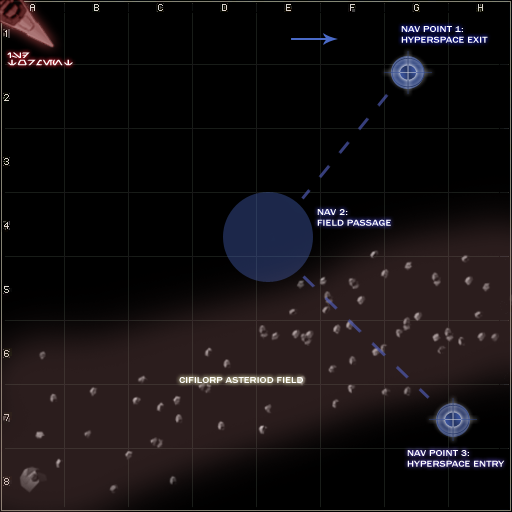
<style>
.page{position:relative;width:512px;height:512px;background:#000000}
.page>*{position:absolute;margin:0}
.t1{font:9px "FranklinGothic-Medium";letter-spacing:0.01em;color:#ffffff;scale:1.2 1}
.t2{font:6px "Aurabesh";letter-spacing:0.01em;color:#ffffff;scale:1.2 1}
</style>
<div class="page">
<p class="t1" style="left:401px;top:26px;width:87px;height:17px">NAV POINT 1: <br>HYPERSPACE EXIT</p>
<p class="t2" style="left:7px;top:52px;width:66px;height:14px">ISD<br>TORMENT</p>
<p class="t1" style="left:317px;top:209px;width:74px;height:17px">NAV 2:<br>FIELD PASSAGE</p>
<p class="t1" style="left:179px;top:377px;width:124px;height:6px">CIFILORP ASTERIOD FIELD</p>
<p class="t1" style="left:407px;top:450px;width:98px;height:17px">NAV POINT 3: <br>HYPERSPACE ENTRY</p>
</div>
